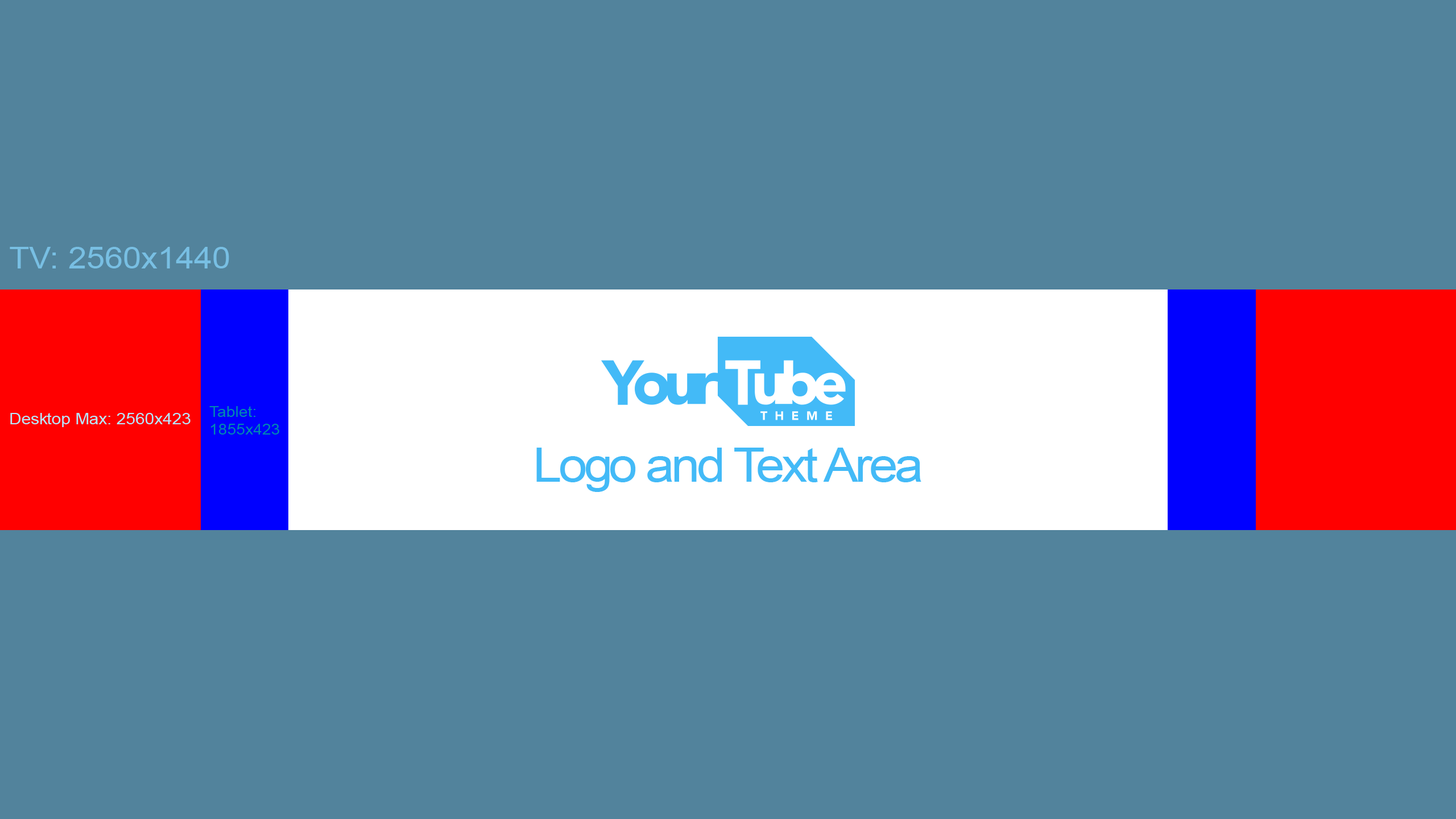
<style>
.page{position:relative;width:1456px;height:819px;background:#52839c}
.page>*{position:absolute;margin:0}
.t1{font:30.2px "ArialMT";color:#78bfe3;scale:1.09 1}
.t2{font:15.6px "ArialMT";color:#b6e6ff;scale:1.09 1}
.t3{font:14.8px/17.3px "ArialMT";color:#008baf;scale:1.09 1}
.t4{font:47.5px "ArialMT";letter-spacing:-0.06em;color:#43baf7;scale:1.09 1}
</style>
<div class="page">
<p class="t1" style="left:10px;top:247px;width:219px;height:21px">TV: 2560x1440</p>
<p class="t2" style="left:10px;top:413px;width:181px;height:14px">Desktop Max: 2560x423</p>
<p class="t3" style="left:209px;top:406px;width:70px;height:29px">Tablet:<br>1855x423</p>
<p class="t4" style="left:536px;top:448px;width:385px;height:44px">Logo and Text Area</p>
</div>
